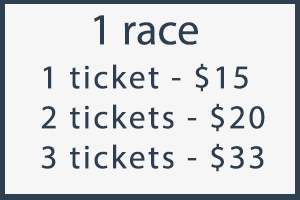
<style>
.page{position:relative;width:300px;height:200px;background:#f6f6f6}
.page>*{position:absolute;margin:0}
.t1{font:44.4px "MyriadPro-Regular";color:#2c3e50}
.t2{font:33.3px "MyriadPro-Regular";letter-spacing:0.075em;color:#2c3e50}
</style>
<div class="page">
<p class="t1" style="left:94px;top:15px;width:104px;height:30px">1 race</p>
<p class="t2" style="left:41px;top:63px;width:224px;height:109px">1 ticket - $15<br>2 tickets - $20<br>3 tickets - $33</p>
</div>
